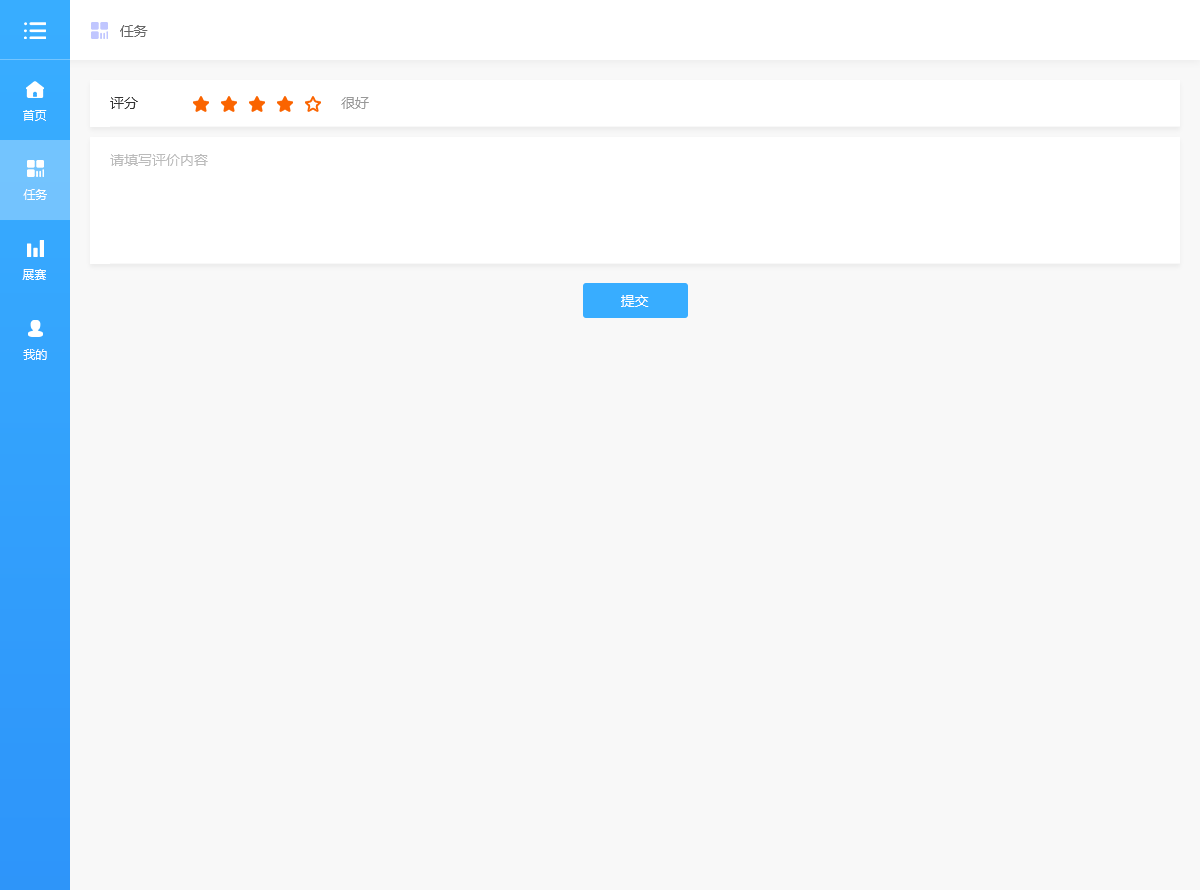
<style>
.page{position:relative;width:1200px;height:890px;background:#f8f8f8}
.page>*{position:absolute;margin:0}
.t1{font:14px "MicrosoftYaHei";color:#666666}
.t2{font:14px "MicrosoftYaHei";color:#333333}
.t3{font:14px "MicrosoftYaHei";color:#999999}
.t4{font:12px "MicrosoftYaHei";color:#ffffff}
.t5{font:14px "MicrosoftYaHei";color:#bababa}
.t6{font:14px "MicrosoftYaHei";color:#ffffff}
</style>
<div class="page">
<p class="t1" style="left:120px;top:25px;width:28px;height:12px">任务</p>
<p class="t2" style="left:110px;top:97px;width:28px;height:12px">评分</p>
<p class="t3" style="left:341px;top:97px;width:28px;height:12px">很好</p>
<p class="t4" style="left:23px;top:110px;width:24px;height:11px">首页</p>
<p class="t5" style="left:110px;top:154px;width:98px;height:12px">请填写评价内容</p>
<p class="t4" style="left:23px;top:189px;width:24px;height:11px">任务</p>
<p class="t4" style="left:22px;top:269px;width:24px;height:11px">展赛</p>
<p class="t6" style="left:621px;top:295px;width:28px;height:12px">提交</p>
<p class="t4" style="left:23px;top:349px;width:24px;height:11px">我的</p>
</div>
